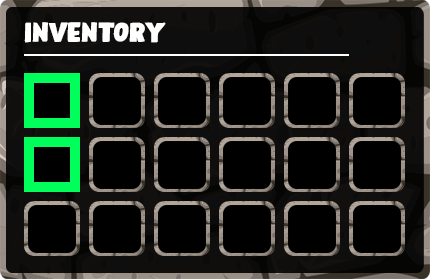
<style>
.page{position:relative;width:430px;height:279px;background:#000000}
.page>*{position:absolute;margin:0}
.t1{font:28px "BumperStickerDEMO-Regular";color:#ffffff}
</style>
<div class="page">
<p class="t1" style="left:24px;top:22px;width:142px;height:21px">INVENTORY</p>
</div>
